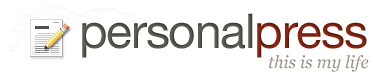
<style>
.page{position:relative;width:373px;height:77px;background:#ffffff}
.page>*{position:absolute;margin:0}
.t1{font:48px "HelveticaNeue";letter-spacing:-0.025em;color:#616158}
.t2{font:48px "HelveticaNeue";letter-spacing:-0.025em;color:#942610}
.t3{font:17px "Georgia-Italic";color:#9c978d}
</style>
<div class="page">
<p class="t1" style="left:82px;top:13px;width:285px;height:45px">personal<span class="t2">press</span></p>
<p class="t3" style="left:269px;top:55px;width:100px;height:17px">this is my life</p>
</div>
